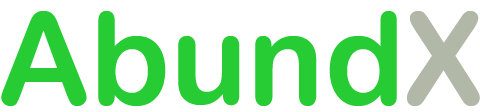
<style>
.page{position:relative;width:480px;height:112px;background:#ffffff}
.page>*{position:absolute;margin:0}
.t1{font:128px "ArialRoundedMTBold";letter-spacing:0.021em;color:#27cc35}
.t2{font:128px "ArialRoundedMTBold";letter-spacing:0.021em;color:#b1b8a8}
</style>
<div class="page">
<p class="t1" style="left:1px;top:11px;width:479px;height:95px">Abund<span class="t2">X</span></p>
</div>
